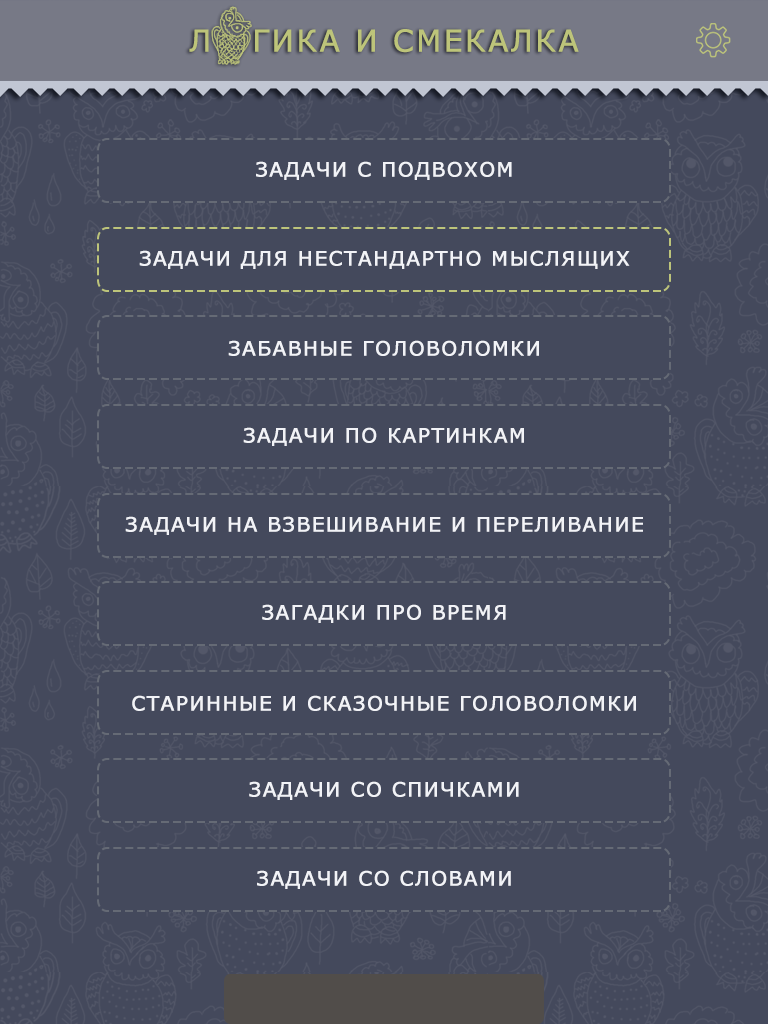
<style>
.page{position:relative;width:768px;height:1024px;background:#44495c}
.page>*{position:absolute;margin:0}
.t1{font:30px "Verdana";letter-spacing:0.05em;color:#bdc47a;text-transform:uppercase;font-weight:bold}
.t2{font:20px "Verdana";letter-spacing:0.05em;color:#f2f3f7;text-transform:uppercase;font-weight:bold}
</style>
<div class="page">
<p class="t1" style="left:189px;top:29px;width:390px;height:24px">Л   гика и смекалка</p>
<p class="t2" style="left:256px;top:161px;width:256px;height:19px">задачи с подвохом</p>
<p class="t2" style="left:139px;top:250px;width:491px;height:19px">задачи для нестандартно мыслящих</p>
<p class="t2" style="left:228px;top:340px;width:311px;height:16px">забавные головоломки</p>
<p class="t2" style="left:243px;top:427px;width:281px;height:19px">задачи по картинкам</p>
<p class="t2" style="left:125px;top:516px;width:518px;height:19px">задачи на взвешивание и переливание</p>
<p class="t2" style="left:262px;top:604px;width:244px;height:19px">загадки про время</p>
<p class="t2" style="left:132px;top:695px;width:504px;height:16px">старинные и сказочные головоломки</p>
<p class="t2" style="left:249px;top:781px;width:270px;height:19px">задачи со спичками</p>
<p class="t2" style="left:257px;top:870px;width:254px;height:19px">задачи со словами</p>
</div>
